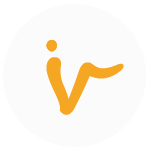
<style>
.page{position:relative;width:150px;height:150px;background:#fbfbfb}
.page>*{position:absolute;margin:0}
.t1{font:112.5px "SegoeScript-Bold";color:#f5a623}
</style>
<div class="page">
<p class="t1" style="left:46px;top:57px;width:78px;height:58px">v</p>
</div>
